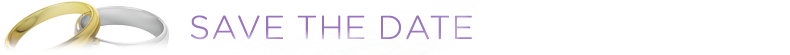
<style>
.page{position:relative;width:790px;height:55px;background:#ffffff}
.page>*{position:absolute;margin:0}
.t1{font:32.8px "GothamRounded-Light";color:#9973bd;text-transform:uppercase;font-weight:bold}
</style>
<div class="page">
<p class="t1" style="left:191px;top:15px;width:281px;height:25px">Save the Date</p>
</div>
